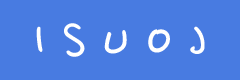
<style>
.page{position:relative;width:240px;height:80px;background:#487be1}
.page>*{position:absolute;margin:0}
.t1{font:60px "NanumPenOTF";color:#ffffff}
</style>
<div class="page">
<p class="t1" style="left:36px;top:23px;width:169px;height:34px">I S U O J</p>
</div>
